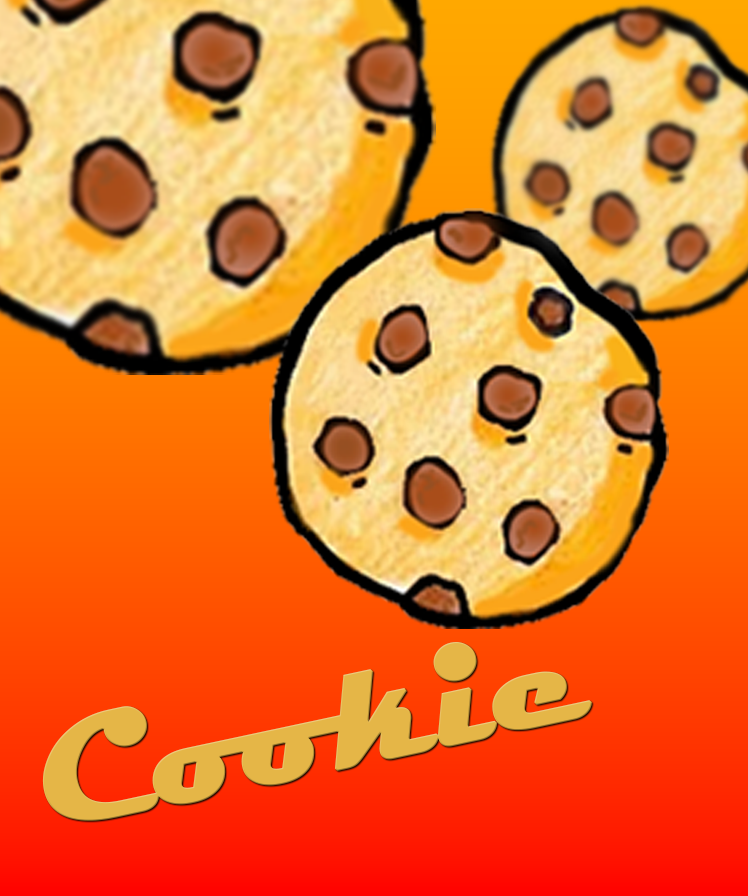
<style>
.page{position:relative;width:748px;height:896px}
.page>*{position:absolute;margin:0}
.t1{font:150px "Magneto-Bold";color:#e5b647;font-weight:bold}
</style>
<div class="page">
<p class="t1" style="left:42px;top:642px;width:550px;height:179px;rotate:-12deg">Cookie</p>
</div>
